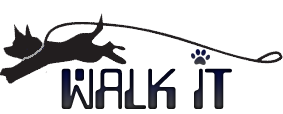
<style>
.page{position:relative;width:283px;height:114px;background:#ffffff}
.page>*{position:absolute;margin:0}
.t1{font:48px "LazenbyComputer-Smooth";letter-spacing:-0.025em}
</style>
<div class="page">
<p class="t1" style="left:61px;top:68px;width:171px;height:41px">Walk it</p>
</div>
